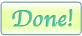
<style>
.page{position:relative;width:82px;height:36px}
.page>*{position:absolute;margin:0}
.t1{font:24px "Apple-Chancery";color:#50be93;font-weight:bold}
</style>
<div class="page">
<p class="t1" style="left:12px;top:9px;width:61px;height:18px">Done!</p>
</div>
